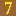
<style>
.page{position:relative;width:16px;height:16px;background:#996633}
.page>*{position:absolute;margin:0}
.t1{font:18px "Sylfaen";color:#f5e814}
</style>
<div class="page">
<p class="t1" style="left:5px;top:2px;width:7px;height:12px">7</p>
</div>
